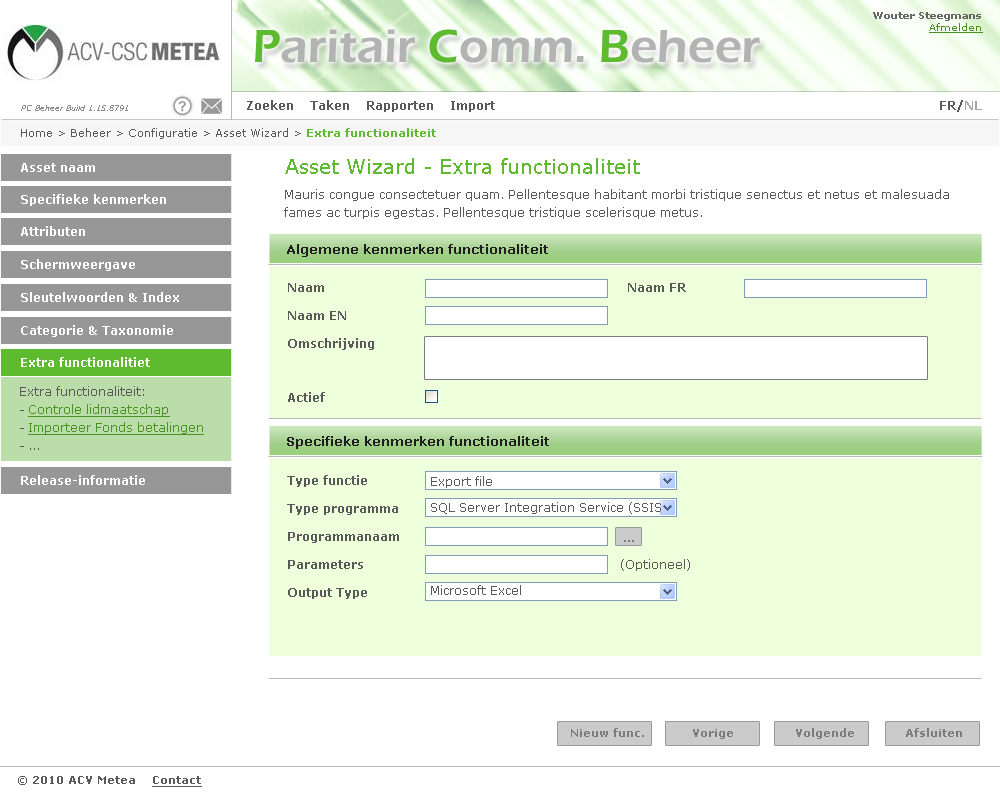
<style>
.page{position:relative;width:1000px;height:800px;background:#ffffff}
.page>*{position:absolute;margin:0}
.t1{font:10px "Verdana-Bold";color:#666666}
.t2{font:10px "Verdana";color:#488f24;text-decoration:underline}
.t3{font:48px "ErasITC-Demi";color:#b3b3b3}
.t4{font:48px "ErasITC-Demi";color:#5eba2f}
.t5{font:12px "Verdana-Bold";color:#595959}
.t6{font:12px "Verdana-Bold";color:#a4a4a4}
.t7{font:8px "Verdana-Italic";color:#8c8c8c}
.t8{font:11px "Verdana";color:#595959}
.t9{font:11px "Verdana-Bold";color:#5eba2f}
.t10{font:20px "Verdana";color:#5eba2f}
.t11{font:12px "Verdana-Bold";color:#ffffff}
.t12{font:12px/18px "Verdana";color:#595959}
.t13{font:13px "Verdana-Bold";color:#1e1e1e}
.t14{font:12px/18px "Verdana-Bold";color:#595959}
.t15{font:12px/18px "Verdana";color:#4a9225;text-decoration:underline}
.t16{font:12px "Verdana";color:#595959}
.t17{font:11px "Verdana-Bold";color:#7c7c7c}
.t18{font:11px "Verdana-Bold";color:#595959}
.t19{font:11px "Verdana-Bold";color:#595959;text-decoration:underline}
</style>
<div class="page">
<p class="t1" style="left:873px;top:12px;width:110px;height:21px;text-align:right">Wouter Steegmans<br><span class="t2">Afmelden</span></p>
<p class="t3" style="left:255px;top:29px;width:505px;height:34px"><span class="t4">P</span>aritair <span class="t4">C</span>omm. <span class="t4">B</span>eheer</p>
<p class="t5" style="left:247px;top:100px;width:248px;height:12px">Zoeken    Taken    Rapporten    Import</p>
<p class="t5" style="left:940px;top:100px;width:42px;height:12px">FR/<span class="t6">NL</span></p>
<p class="t7" style="left:21px;top:105px;width:107px;height:6px">PC Beheer Build 1.15.8791</p>
<p class="t8" style="left:21px;top:128px;width:415px;height:11px">Home &gt; Beheer &gt; Configuratie &gt; Asset Wizard &gt; <span class="t9">Extra functionaliteit</span></p>
<p class="t10" style="left:285px;top:158px;width:355px;height:16px">Asset Wizard - Extra functionaliteit</p>
<p class="t11" style="left:21px;top:163px;width:74px;height:9px">Asset naam</p>
<p class="t11" style="left:21px;top:194px;width:145px;height:12px">Specifieke kenmerken</p>
<p class="t12" style="left:284px;top:189px;width:665px;height:30px">Mauris congue consectetuer quam. Pellentesque habitant morbi tristique senectus et netus et malesuada <br>fames ac turpis egestas. Pellentesque tristique scelerisque metus.</p>
<p class="t11" style="left:21px;top:226px;width:64px;height:10px">Attributen</p>
<p class="t13" style="left:287px;top:244px;width:261px;height:13px">Algemene kenmerken functionaliteit</p>
<p class="t11" style="left:21px;top:259px;width:114px;height:12px">Schermweergave</p>
<p class="t11" style="left:21px;top:292px;width:158px;height:10px">Sleutelwoorden &amp; Index</p>
<p class="t14" style="left:288px;top:283px;width:86px;height:119px">Naam<br><br>Naam EN<br><br>Omschrijving<br><br><br>Actief</p>
<p class="t5" style="left:628px;top:283px;width:58px;height:9px">Naam FR</p>
<p class="t11" style="left:21px;top:325px;width:152px;height:12px">Categorie &amp; Taxonomie</p>
<p class="t11" style="left:21px;top:357px;width:129px;height:10px">Extra functionalitiet</p>
<p class="t15" style="left:20px;top:386px;width:184px;height:64px"><span class="t12">Extra functionaliteit:<br>- </span>Controle lidmaatschap<br><span class="t12">- </span>Importeer Fonds betalingen<br><span class="t12">- ...</span></p>
<p class="t13" style="left:287px;top:436px;width:262px;height:13px">Specifieke kenmerken functionaliteit</p>
<p class="t11" style="left:21px;top:475px;width:124px;height:10px">Release-informatie</p>
<p class="t14" style="left:287px;top:475px;width:112px;height:124px">Type functie<br><br>Type programma<br><br>Programmanaam<br><br>Parameters<br><br>Output Type</p>
<p class="t16" style="left:431px;top:476px;width:61px;height:12px">Export file</p>
<p class="t16" style="left:431px;top:502px;width:230px;height:12px">SQL Server Integration Service (SSIS</p>
<p class="t17" style="left:624px;top:540px;width:10px;height:2px">...</p>
<p class="t16" style="left:621px;top:559px;width:69px;height:12px">(Optioneel)</p>
<p class="t16" style="left:431px;top:585px;width:90px;height:10px">Microsoft Excel</p>
<p class="t17" style="left:571px;top:728px;width:73px;height:9px">Nieuw func.</p>
<p class="t17" style="left:693px;top:729px;width:40px;height:10px">Vorige</p>
<p class="t17" style="left:796px;top:728px;width:58px;height:11px">Volgende</p>
<p class="t17" style="left:906px;top:728px;width:56px;height:9px">Afsluiten</p>
<p class="t18" style="left:18px;top:776px;width:184px;height:11px"><span class="t8">©</span> 2010 ACV Metea    <span class="t19">Contact</span></p>
</div>
